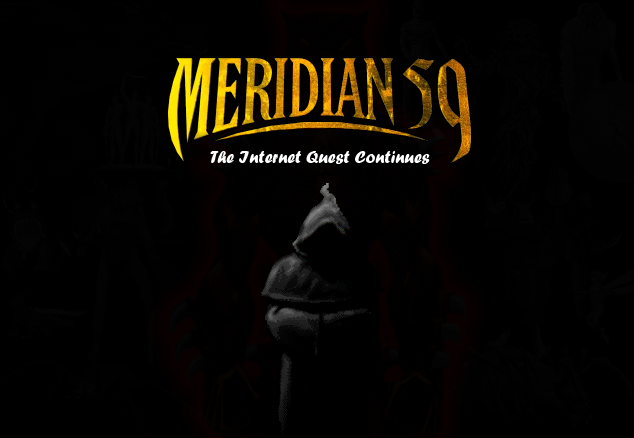
<style>
.page{position:relative;width:634px;height:438px;background:#000000}
.page>*{position:absolute;margin:0}
.t1{font:18px "ForteMT";color:#ffffff}
</style>
<div class="page">
<p class="t1" style="left:210px;top:151px;width:220px;height:13px">The Internet Quest Continues</p>
</div>
